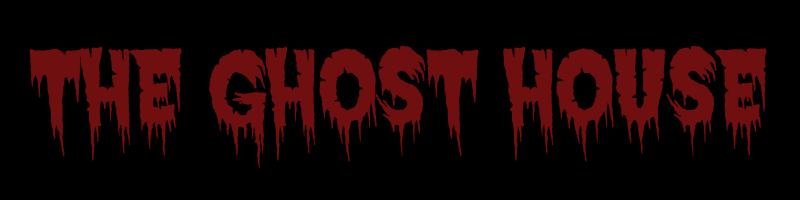
<style>
.page{position:relative;width:800px;height:200px;background:#000000}
.page>*{position:absolute;margin:0}
.t1{font:104px "ExquisiteCorpse";color:#6f0f0f}
</style>
<div class="page">
<p class="t1" style="left:29px;top:45px;width:738px;height:124px">The Ghost House</p>
</div>
